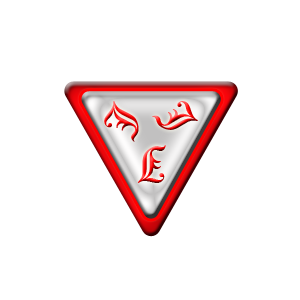
<style>
.page{position:relative;width:300px;height:300px;background:#ffffff}
.page>*{position:absolute;margin:0}
.t1{font:42.9px "OldEnglishTextMT"}
</style>
<div class="page">
<p class="t1" style="left:104px;top:101px;width:35px;height:41px;rotate:-63deg">J</p>
<p class="t1" style="left:152px;top:101px;width:46px;height:29px;rotate:59deg">J</p>
<p class="t1" style="left:137px;top:145px;width:29px;height:38px;rotate:180deg">J</p>
</div>
